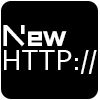
<style>
.page{position:relative;width:100px;height:100px;background:#000000}
.page>*{position:absolute;margin:0}
.t1{font:30px "SYNNova-Bold";color:#ffffff}
.t2{font:30px "Corbel";color:#ffffff}
</style>
<div class="page">
<p class="t1" style="left:3px;top:25px;width:64px;height:22px">New</p>
<p class="t2" style="left:4px;top:50px;width:93px;height:24px">HTTP://</p>
</div>
